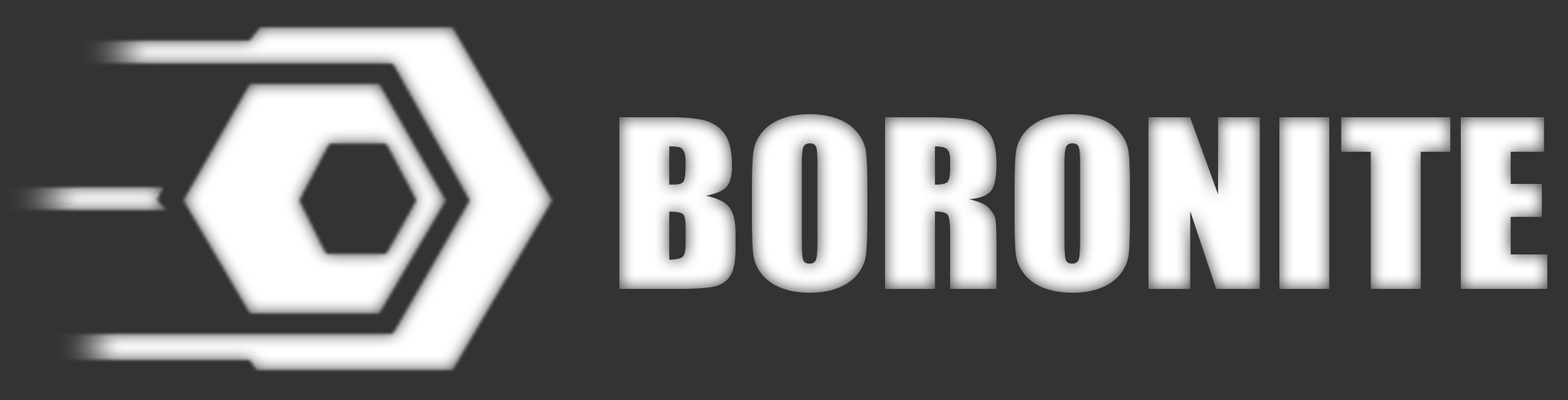
<style>
.page{position:relative;width:1568px;height:400px;background:#333333}
.page>*{position:absolute;margin:0}
.t1{font:216.4px "Impact";color:#ffffff;scale:1.12 1}
</style>
<div class="page">
<p class="t1" style="left:619px;top:114px;width:928px;height:178px">BORONITE</p>
</div>
